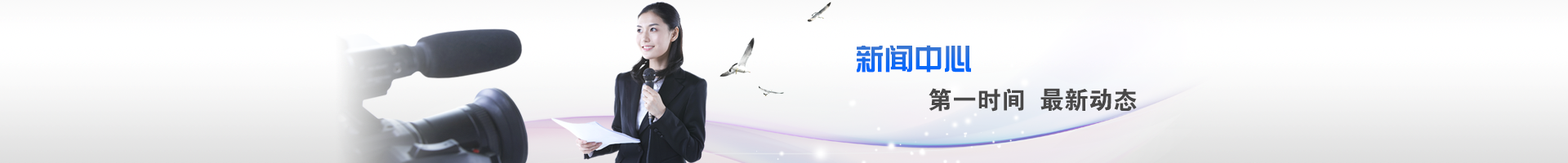
<style>
.page{position:relative;width:1568px;height:163px}
.page>*{position:absolute;margin:0}
.t1{font:29.4px "HYk1gj"}
.t2{font:24.5px "FZDHTJW--GB1-0";color:#494848}
</style>
<div class="page">
<p class="t1" style="left:857px;top:45px;width:114px;height:28px">新闻中心</p>
<p class="t2" style="left:929px;top:88px;width:208px;height:24px">第一时间  最新动态</p>
</div>
